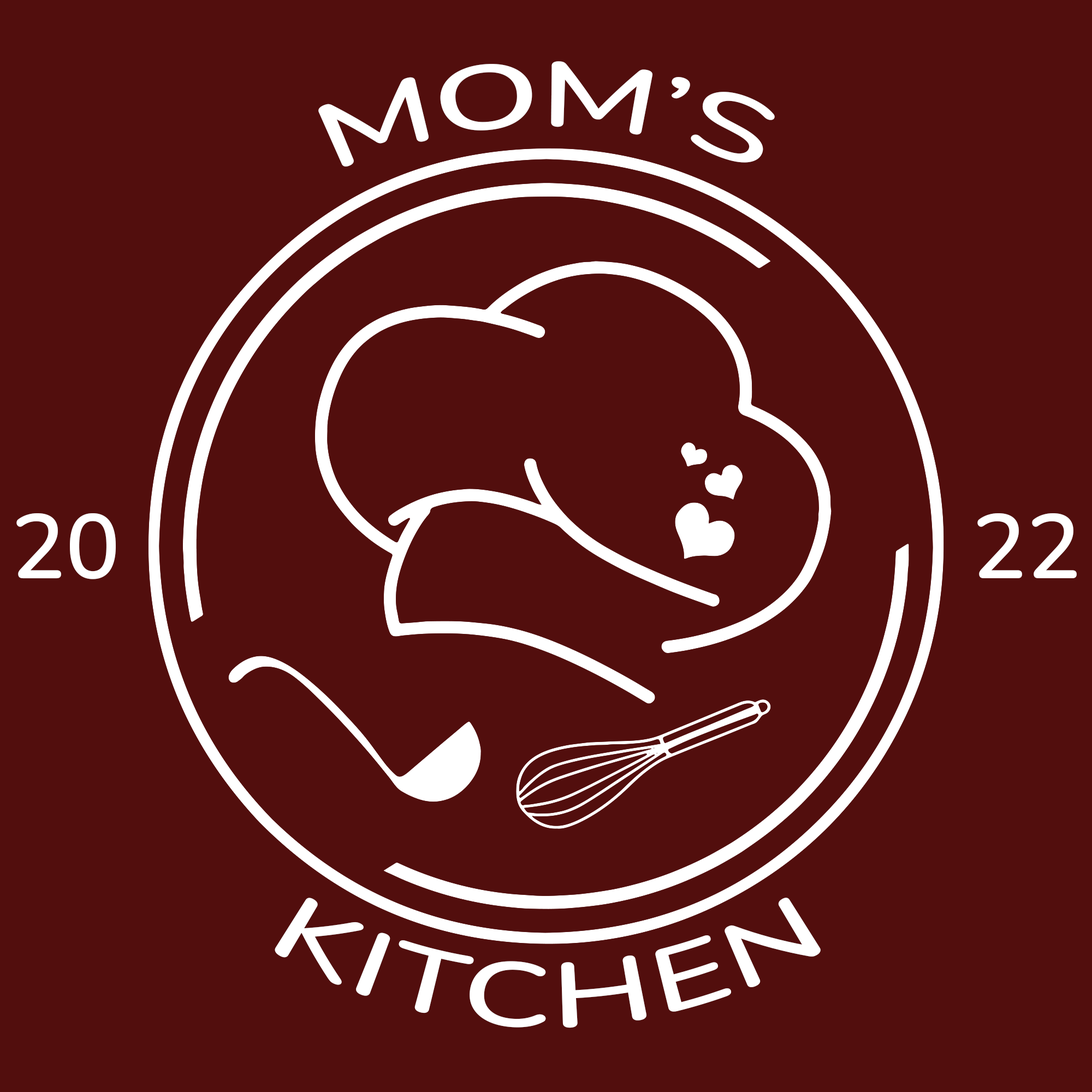
<style>
.page{position:relative;width:1092px;height:1092px;background:#520e0d}
.page>*{position:absolute;margin:0}
.t1{font:91px "Nunito-SemiBold";color:#ffffff}
</style>
<div class="page">
<p class="t1" style="left:318px;top:61px;width:457px;height:106px">MOM’S</p>
<p class="t1" style="left:16px;top:513px;width:100px;height:66px">20</p>
<p class="t1" style="left:977px;top:513px;width:100px;height:65px">22</p>
<p class="t1" style="left:275px;top:898px;width:546px;height:130px">KITCHEN</p>
</div>
